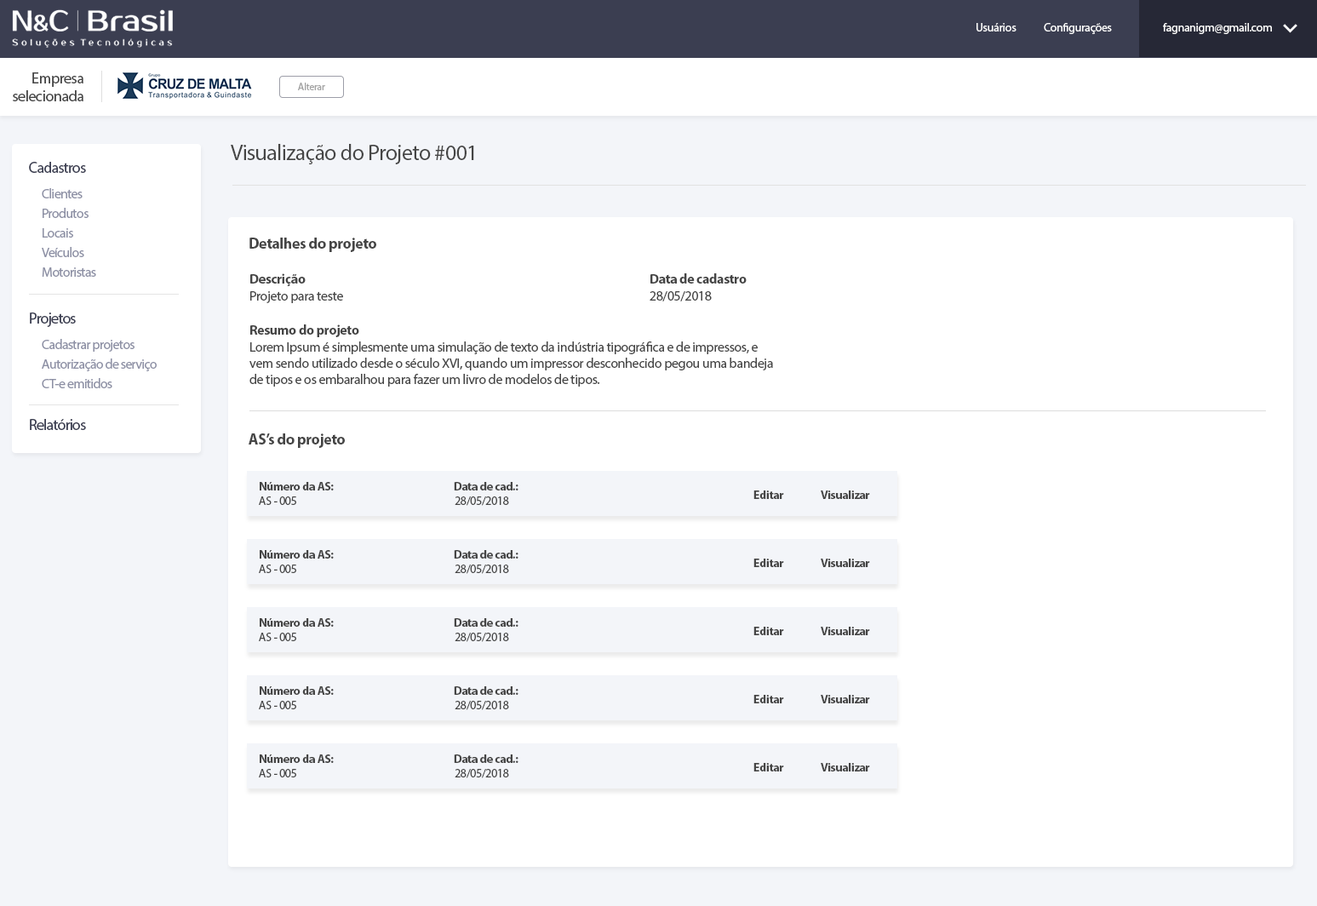
<style>
.page{position:relative;width:1317px;height:906px;background:#ffffff}
.page>*{position:absolute;margin:0}
.t1{font:11.9px "MyriadPro-Regular";letter-spacing:-0.025em;color:#ffffff}
.t2{font:15.3px/17.8px "MyriadPro-Regular";letter-spacing:-0.025em;color:#454545}
.t3{font:10.2px "MyriadPro-Regular";letter-spacing:-0.025em;color:#a2a2a2}
.t4{font:22.1px "MyriadPro-Regular";letter-spacing:-0.025em;color:#454545}
.t5{font:15.3px "MyriadPro-Regular";letter-spacing:-0.045em;color:#3b3e51}
.t6{font:13.6px "MyriadPro-Regular";letter-spacing:-0.045em;color:#8c8fa4}
.t7{font:15.3px "MyriadPro-Bold";letter-spacing:-0.025em;color:#454545}
.t8{font:13.6px "MyriadPro-Bold";letter-spacing:-0.025em;color:#454545}
.t9{font:13.6px "MyriadPro-Regular";letter-spacing:-0.025em;color:#454545}
.t10{font:13.6px/16.1px "MyriadPro-Regular";letter-spacing:-0.025em;color:#454545}
.t11{font:13.6px "MyriadPro-Regular";letter-spacing:-0.045em;color:#8d90a5}
.t12{font:11.9px "MyriadPro-Bold";letter-spacing:-0.025em;color:#454545}
.t13{font:11.9px "MyriadPro-Regular";letter-spacing:-0.025em;color:#454545}
</style>
<div class="page">
<p class="t1" style="left:976px;top:23px;width:40px;height:8px">Usuários</p>
<p class="t1" style="left:1043px;top:23px;width:69px;height:11px">Configurações</p>
<p class="t1" style="left:1163px;top:23px;width:109px;height:11px">fagnanigm@gmail.com</p>
<p class="t2" style="left:13px;top:72px;width:70px;height:29px;text-align:right">Empresa<br>selecionada</p>
<p class="t3" style="left:298px;top:83px;width:27px;height:7px">Alterar</p>
<p class="t4" style="left:231px;top:144px;width:243px;height:20px">Visualização do Projeto #001</p>
<p class="t5" style="left:29px;top:162px;width:57px;height:11px">Cadastros</p>
<p class="t6" style="left:42px;top:188px;width:41px;height:10px">Clientes</p>
<p class="t6" style="left:43px;top:208px;width:46px;height:10px">Produtos</p>
<p class="t6" style="left:43px;top:228px;width:30px;height:9px">Locais</p>
<p class="t7" style="left:249px;top:237px;width:127px;height:15px">Detalhes do projeto</p>
<p class="t6" style="left:42px;top:247px;width:42px;height:10px">Veículos</p>
<p class="t6" style="left:42px;top:267px;width:54px;height:10px">Motoristas</p>
<p class="t8" style="left:250px;top:273px;width:56px;height:13px">Descrição</p>
<p class="t8" style="left:650px;top:273px;width:96px;height:10px">Data de cadastro</p>
<p class="t9" style="left:250px;top:291px;width:93px;height:12px">Projeto para teste</p>
<p class="t9" style="left:649px;top:291px;width:63px;height:10px">28/05/2018</p>
<p class="t5" style="left:30px;top:312px;width:46px;height:15px">Projetos</p>
<p class="t8" style="left:250px;top:324px;width:109px;height:13px">Resumo do projeto</p>
<p class="t6" style="left:42px;top:339px;width:92px;height:13px">Cadastrar projetos</p>
<p class="t10" style="left:249px;top:341px;width:524px;height:45px">Lorem Ipsum é simplesmente uma simulação de texto da indústria tipográfica e de impressos, e vem sendo utilizado desde o século XVI, quando um impressor desconhecido pegou uma bandeja de tipos e os embaralhou para fazer um livro de modelos de tipos.</p>
<p class="t11" style="left:42px;top:358px;width:115px;height:13px">Autorização de serviço</p>
<p class="t6" style="left:42px;top:378px;width:70px;height:10px">CT-e emitidos</p>
<p class="t5" style="left:30px;top:419px;width:56px;height:11px">Relatórios</p>
<p class="t7" style="left:249px;top:433px;width:96px;height:15px">AS’s do projeto</p>
<p class="t12" style="left:260px;top:482px;width:74px;height:8px">Número da AS:</p>
<p class="t12" style="left:454px;top:482px;width:64px;height:8px">Data de cad.:</p>
<p class="t13" style="left:259px;top:496px;width:37px;height:9px">AS - 005</p>
<p class="t13" style="left:455px;top:496px;width:54px;height:10px">28/05/2018</p>
<p class="t12" style="left:753px;top:490px;width:31px;height:9px">Editar</p>
<p class="t12" style="left:820px;top:490px;width:50px;height:9px">Visualizar</p>
<p class="t12" style="left:260px;top:550px;width:74px;height:8px">Número da AS:</p>
<p class="t12" style="left:454px;top:550px;width:64px;height:8px">Data de cad.:</p>
<p class="t13" style="left:259px;top:564px;width:37px;height:9px">AS - 005</p>
<p class="t13" style="left:455px;top:564px;width:54px;height:10px">28/05/2018</p>
<p class="t12" style="left:753px;top:558px;width:31px;height:9px">Editar</p>
<p class="t12" style="left:820px;top:558px;width:50px;height:9px">Visualizar</p>
<p class="t12" style="left:260px;top:618px;width:74px;height:8px">Número da AS:</p>
<p class="t12" style="left:454px;top:618px;width:64px;height:8px">Data de cad.:</p>
<p class="t12" style="left:753px;top:626px;width:31px;height:9px">Editar</p>
<p class="t12" style="left:820px;top:626px;width:50px;height:9px">Visualizar</p>
<p class="t13" style="left:259px;top:632px;width:37px;height:9px">AS - 005</p>
<p class="t13" style="left:455px;top:632px;width:54px;height:10px">28/05/2018</p>
<p class="t12" style="left:260px;top:686px;width:74px;height:9px">Número da AS:</p>
<p class="t12" style="left:454px;top:686px;width:64px;height:9px">Data de cad.:</p>
<p class="t13" style="left:259px;top:700px;width:37px;height:9px">AS - 005</p>
<p class="t13" style="left:455px;top:700px;width:54px;height:10px">28/05/2018</p>
<p class="t12" style="left:753px;top:695px;width:31px;height:8px">Editar</p>
<p class="t12" style="left:820px;top:695px;width:50px;height:8px">Visualizar</p>
<p class="t12" style="left:260px;top:754px;width:74px;height:9px">Número da AS:</p>
<p class="t12" style="left:454px;top:754px;width:64px;height:9px">Data de cad.:</p>
<p class="t13" style="left:259px;top:769px;width:37px;height:8px">AS - 005</p>
<p class="t13" style="left:455px;top:769px;width:54px;height:9px">28/05/2018</p>
<p class="t12" style="left:753px;top:763px;width:31px;height:8px">Editar</p>
<p class="t12" style="left:820px;top:763px;width:50px;height:8px">Visualizar</p>
</div>
